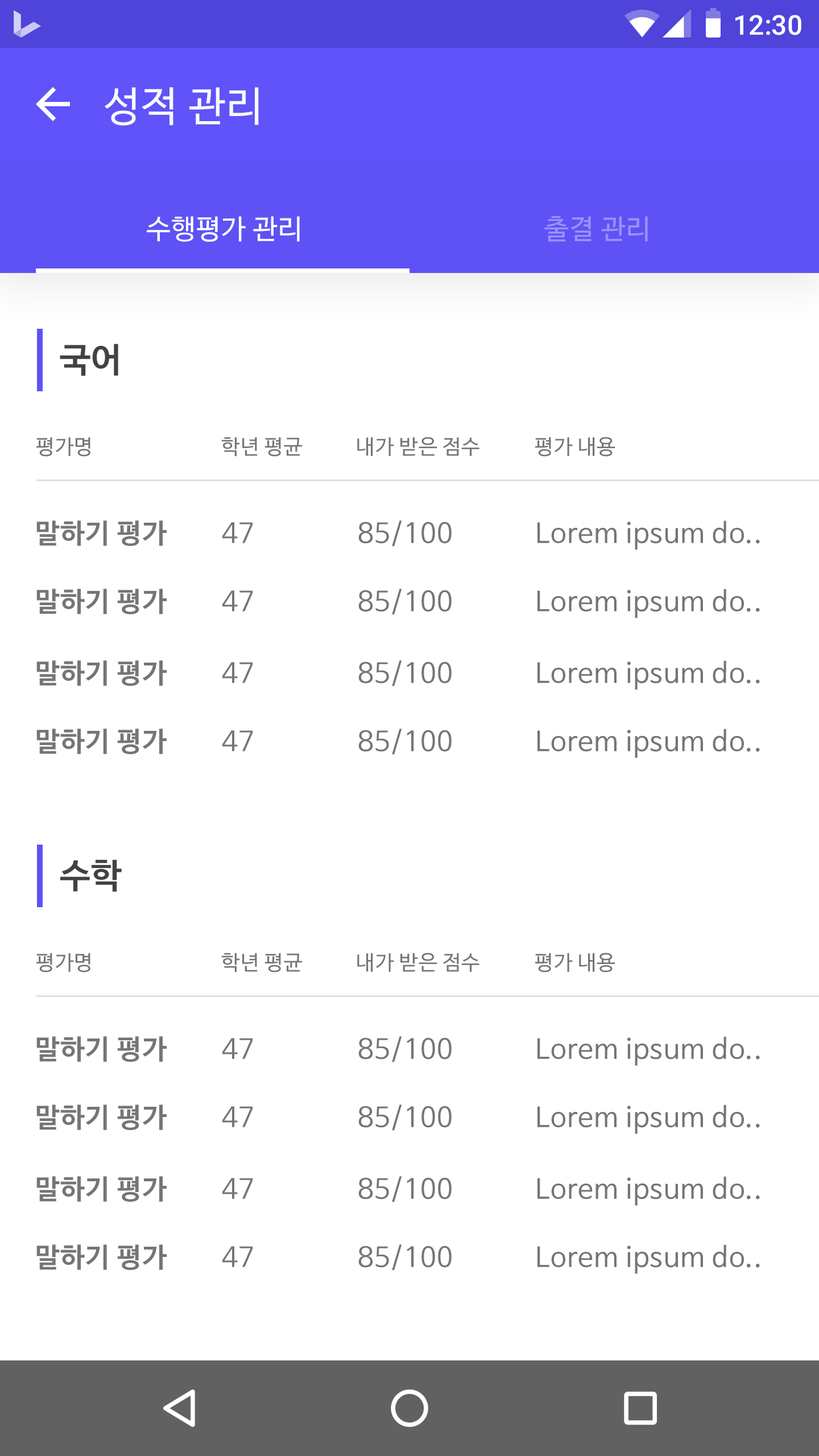
<style>
.page{position:relative;width:819px;height:1456px;background:#ffffff}
.page>*{position:absolute;margin:0}
.t1{font:27.3px "Roboto-Medium";color:#ffffff}
.t2{font:40.9px "NanumBarunGothic";letter-spacing:0.025em;color:#fafafa}
.t3{font:27.3px "NanumBarunGothic";letter-spacing:0.025em;color:#ffffff}
.t4{font:27.3px "NanumBarunGothic";letter-spacing:0.025em;color:#9993f9}
.t5{font:34.2px "NanumBarunGothicBold";letter-spacing:0.025em;color:#424242}
.t6{font:20.5px "NanumBarunGothic";letter-spacing:0.025em;color:#757575}
.t7{font:27.3px "NanumBarunGothicBold";letter-spacing:0.025em;color:#757575}
.t8{font:27.3px "NanumBarunGothic";letter-spacing:0.025em;color:#757575}
</style>
<div class="page">
<p class="t1" style="left:735px;top:15px;width:66px;height:20px">12:30</p>
<p class="t2" style="left:105px;top:87px;width:154px;height:39px">성적 관리</p>
<p class="t3" style="left:147px;top:216px;width:153px;height:26px">수행평가 관리</p>
<p class="t4" style="left:544px;top:216px;width:104px;height:26px">출결 관리</p>
<p class="t5" style="left:60px;top:344px;width:58px;height:32px">국어</p>
<p class="t6" style="left:36px;top:437px;width:54px;height:20px">평가명</p>
<p class="t6" style="left:221px;top:437px;width:82px;height:20px">학년 평균</p>
<p class="t6" style="left:357px;top:437px;width:122px;height:19px">내가 받은 점수</p>
<p class="t6" style="left:535px;top:437px;width:80px;height:20px">평가 내용</p>
<p class="t7" style="left:36px;top:520px;width:131px;height:26px">말하기 평가</p>
<p class="t8" style="left:358px;top:520px;width:94px;height:27px">85/100</p>
<p class="t8" style="left:537px;top:520px;width:223px;height:30px">Lorem ipsum do..</p>
<p class="t8" style="left:222px;top:522px;width:31px;height:21px">47</p>
<p class="t7" style="left:36px;top:589px;width:131px;height:25px">말하기 평가</p>
<p class="t8" style="left:222px;top:590px;width:31px;height:21px">47</p>
<p class="t8" style="left:358px;top:589px;width:94px;height:26px">85/100</p>
<p class="t8" style="left:537px;top:589px;width:223px;height:29px">Lorem ipsum do..</p>
<p class="t7" style="left:36px;top:660px;width:131px;height:26px">말하기 평가</p>
<p class="t8" style="left:222px;top:662px;width:31px;height:21px">47</p>
<p class="t8" style="left:358px;top:660px;width:94px;height:26px">85/100</p>
<p class="t8" style="left:537px;top:660px;width:223px;height:30px">Lorem ipsum do..</p>
<p class="t7" style="left:36px;top:729px;width:131px;height:25px">말하기 평가</p>
<p class="t8" style="left:222px;top:730px;width:31px;height:21px">47</p>
<p class="t8" style="left:358px;top:729px;width:94px;height:26px">85/100</p>
<p class="t8" style="left:537px;top:729px;width:223px;height:29px">Lorem ipsum do..</p>
<p class="t5" style="left:60px;top:859px;width:62px;height:33px">수학</p>
<p class="t6" style="left:36px;top:953px;width:54px;height:20px">평가명</p>
<p class="t6" style="left:221px;top:953px;width:82px;height:20px">학년 평균</p>
<p class="t6" style="left:357px;top:953px;width:122px;height:19px">내가 받은 점수</p>
<p class="t6" style="left:535px;top:953px;width:80px;height:20px">평가 내용</p>
<p class="t7" style="left:36px;top:1036px;width:131px;height:26px">말하기 평가</p>
<p class="t8" style="left:222px;top:1038px;width:31px;height:21px">47</p>
<p class="t8" style="left:358px;top:1036px;width:94px;height:26px">85/100</p>
<p class="t8" style="left:537px;top:1036px;width:223px;height:30px">Lorem ipsum do..</p>
<p class="t7" style="left:36px;top:1104px;width:131px;height:26px">말하기 평가</p>
<p class="t8" style="left:222px;top:1106px;width:31px;height:21px">47</p>
<p class="t8" style="left:358px;top:1104px;width:94px;height:27px">85/100</p>
<p class="t8" style="left:537px;top:1104px;width:223px;height:30px">Lorem ipsum do..</p>
<p class="t7" style="left:36px;top:1176px;width:131px;height:26px">말하기 평가</p>
<p class="t8" style="left:222px;top:1178px;width:31px;height:21px">47</p>
<p class="t8" style="left:358px;top:1176px;width:94px;height:26px">85/100</p>
<p class="t8" style="left:537px;top:1176px;width:223px;height:30px">Lorem ipsum do..</p>
<p class="t7" style="left:36px;top:1244px;width:131px;height:26px">말하기 평가</p>
<p class="t8" style="left:222px;top:1246px;width:31px;height:21px">47</p>
<p class="t8" style="left:358px;top:1244px;width:94px;height:27px">85/100</p>
<p class="t8" style="left:537px;top:1244px;width:223px;height:30px">Lorem ipsum do..</p>
</div>
